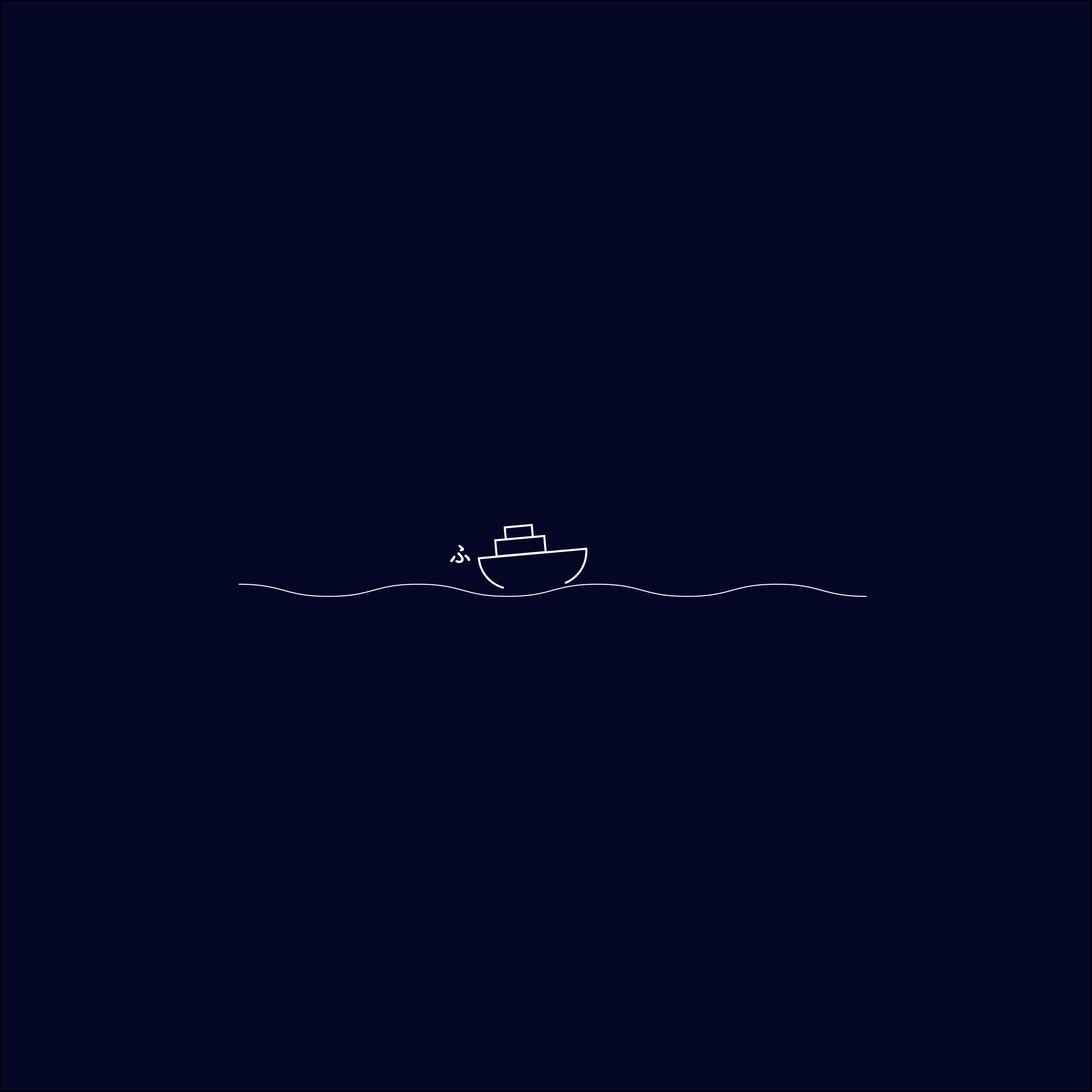
<style>
.page{position:relative;width:1092px;height:1092px;background:#040826}
.page>*{position:absolute;margin:0}
.t1{font:24.3px "TsukuARdGothicStd-B";letter-spacing:0.1em;color:#ffffff}
</style>
<div class="page">
<p class="t1" style="left:450px;top:545px;width:20px;height:18px">ふ</p>
</div>
